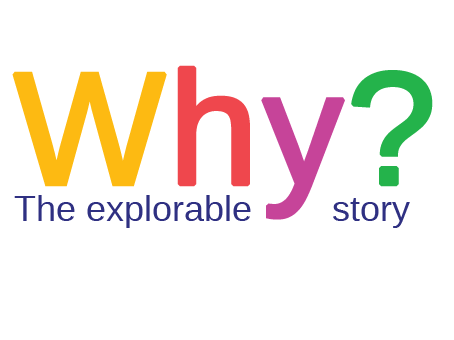
<style>
.page{position:relative;width:454px;height:340px;background:#ffffff}
.page>*{position:absolute;margin:0}
.t1{font:160px "LiberationSans";color:#fdba12;font-weight:bold}
.t2{font:160px "LiberationSans";color:#ef474d;font-weight:bold}
.t3{font:160px "LiberationSans";color:#c64499;font-weight:bold}
.t4{font:160px "LiberationSans";color:#24b34b;font-weight:bold}
.t5{font:36px "LiberationSans";color:#2f3082}
</style>
<div class="page">
<p class="t1" style="left:12px;top:65px;width:421px;height:155px">W<span class="t2">h</span><span class="t3">y</span><span class="t4">?</span></p>
<p class="t5" style="left:14px;top:195px;width:396px;height:33px">The explorable        story</p>
</div>
